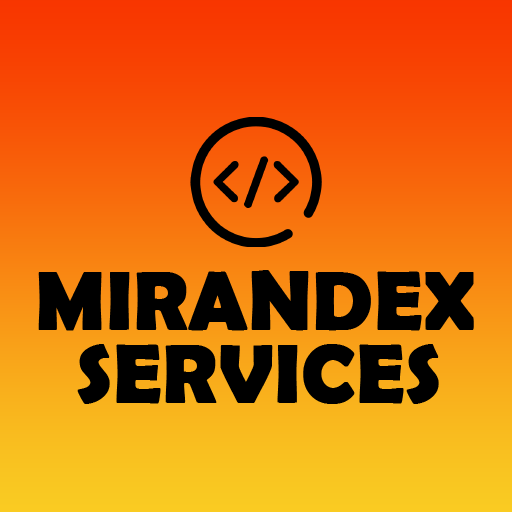
<style>
.page{position:relative;width:512px;height:512px}
.page>*{position:absolute;margin:0}
.t1{font:83.3px "BerlinSansFBDemi-Bold";color:#000000;text-transform:uppercase;font-weight:bold}
</style>
<div class="page">
<p class="t1" style="left:38px;top:270px;width:436px;height:61px">Mirandex</p>
<p class="t1" style="left:77px;top:344px;width:362px;height:60px">Services</p>
</div>
